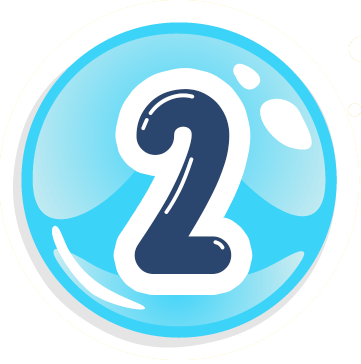
<style>
.page{position:relative;width:361px;height:364px;background:#ffffff}
.page>*{position:absolute;margin:0}
.t1{font:262.5px "BubbleBobble";color:#2a456e}
</style>
<div class="page">
<p class="t1" style="left:134px;top:89px;width:98px;height:185px">2</p>
</div>
